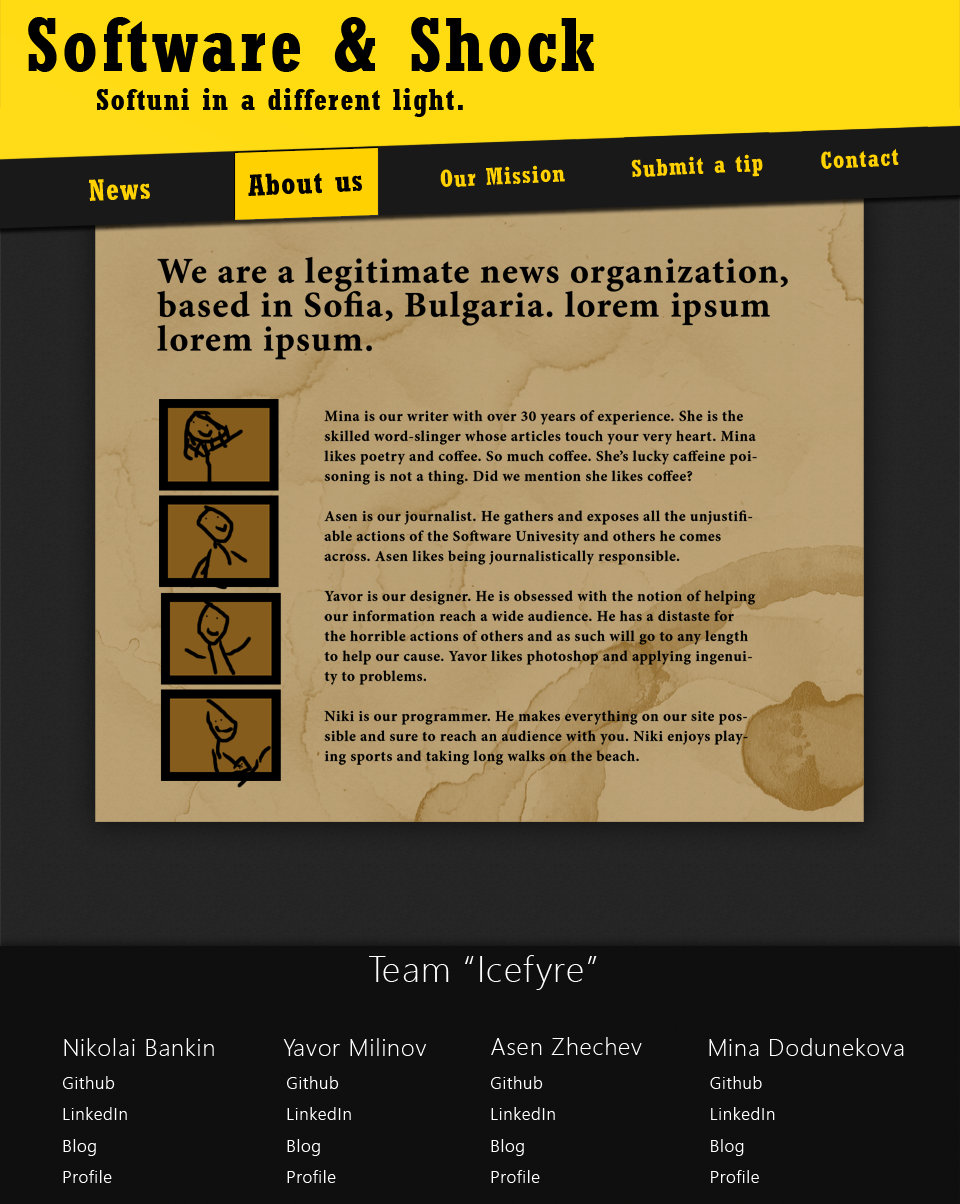
<style>
.page{position:relative;width:960px;height:1204px}
.page>*{position:absolute;margin:0}
.t1{font:75px "Rockwell-CondensedBold";letter-spacing:0.04em;color:#000000}
.t2{font:30px "Rockwell-CondensedBold";letter-spacing:0.04em;color:#000000}
.t3{font:24px "Rockwell-CondensedBold";letter-spacing:0.04em;color:#ffd400}
.t4{font:30px "Rockwell-CondensedBold";letter-spacing:0.04em;color:#ffd400}
.t5{font:36px/34px "MinionPro-Bold";letter-spacing:0.04em;color:#000000}
.t6{font:15px/20px "MinionPro-Bold";letter-spacing:0.04em;color:#000000}
.t7{font:36px "SegoeUI-Light";letter-spacing:0.04em;color:#ffffff}
.t8{font:24px "SegoeUI-Light";letter-spacing:0.04em;color:#ffffff}
.t9{font:17px/31.5px "SegoeUI-Semilight";letter-spacing:0.04em;color:#ffffff}
</style>
<div class="page">
<p class="t1" style="left:28px;top:17px;width:566px;height:55px">Software &amp; Shock</p>
<p class="t2" style="left:96px;top:88px;width:367px;height:29px">Softuni in a different light.</p>
<p class="t3" style="left:821px;top:148px;width:78px;height:21px;rotate:-3deg">Contact</p>
<p class="t3" style="left:631px;top:154px;width:132px;height:23px;rotate:-3deg">Submit a tip</p>
<p class="t2" style="left:248px;top:172px;width:114px;height:24px;rotate:-3deg">About us</p>
<p class="t3" style="left:440px;top:165px;width:125px;height:22px;rotate:-3deg">Our Mission</p>
<p class="t4" style="left:89px;top:179px;width:61px;height:22px;rotate:-3deg">News</p>
<p class="t5" style="left:157px;top:257px;width:631px;height:103px">We are a legitimate news organization, based in Sofia, Bulgaria. lorem ipsum lorem ipsum.</p>
<p class="t6" style="left:324px;top:410px;width:433px;height:355px">Mina is our writer with over 30 years of experience. She is the skilled word-slinger whose articles touch your very heart. Mina likes poetry and coffee. So much coffee. She’s lucky caffeine poisoning is not a thing. Did we mention she likes coffee?<br><br>Asen is our journalist. He gathers and exposes all the unjustifiable actions of the Software Univesity and others he comes across. Asen likes being journalistically responsible.<br><br>Yavor is our designer. He is obsessed with the notion of helping our information reach a wide audience. He has a distaste for the horrible actions of others and as such will go to any length to help our cause. Yavor likes photoshop and applying ingenuity to problems.<br><br>Niki is our programmer. He makes everything on our site possible and sure to reach an audience with you. Niki enjoys playing sports and taking long walks on the beach.</p>
<p class="t7" style="left:369px;top:955px;width:228px;height:35px">Team “Icefyre”</p>
<p class="t8" style="left:64px;top:1038px;width:150px;height:18px">Nikolai Bankin</p>
<p class="t8" style="left:283px;top:1038px;width:144px;height:18px">Yavor Milinov</p>
<p class="t8" style="left:491px;top:1037px;width:151px;height:18px">Asen Zhechev</p>
<p class="t8" style="left:709px;top:1038px;width:195px;height:18px">Mina Dodunekova</p>
<p class="t9" style="left:63px;top:1076px;width:64px;height:107px">Github<br>LinkedIn<br>Blog<br>Profile</p>
<p class="t9" style="left:287px;top:1076px;width:64px;height:107px">Github<br>LinkedIn<br>Blog<br>Profile</p>
<p class="t9" style="left:491px;top:1076px;width:64px;height:107px">Github<br>LinkedIn<br>Blog<br>Profile</p>
<p class="t9" style="left:710px;top:1076px;width:65px;height:107px">Github<br>LinkedIn<br>Blog<br>Profile</p>
</div>
